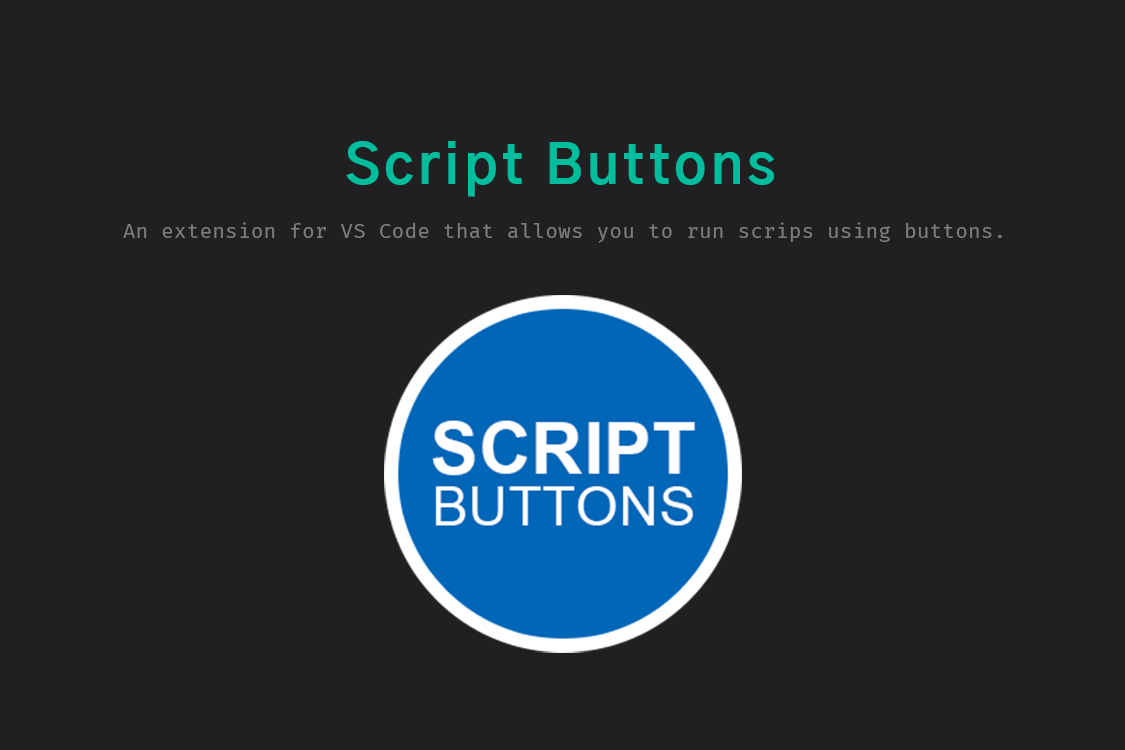
<style>
.page{position:relative;width:1125px;height:750px;background:#202022}
.page>*{position:absolute;margin:0}
.t1{font:55px "GothicA1-Bold";letter-spacing:0.075em;color:#00bd9d}
.t2{font:20px "FiraCode-Regular";letter-spacing:0.025em;color:#7d7d7e}
</style>
<div class="page">
<p class="t1" style="left:346px;top:141px;width:428px;height:56px">Script Buttons</p>
<p class="t2" style="left:123px;top:222px;width:879px;height:21px">An extension for VS Code that allows you to run scrips using buttons.</p>
</div>
